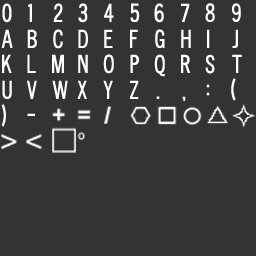
<style>
.page{position:relative;width:256px;height:256px;background:#333333}
.page>*{position:absolute;margin:0}
.t1{font:24px "CHANLPlain";color:#ffffff}
</style>
<div class="page">
<p class="t1" style="left:2px;top:3px;width:10px;height:20px">0</p>
<p class="t1" style="left:28px;top:3px;width:4px;height:19px">1</p>
<p class="t1" style="left:53px;top:3px;width:10px;height:19px">2</p>
<p class="t1" style="left:78px;top:3px;width:10px;height:20px">3</p>
<p class="t1" style="left:104px;top:3px;width:10px;height:19px">4</p>
<p class="t1" style="left:130px;top:3px;width:10px;height:19px">5</p>
<p class="t1" style="left:154px;top:3px;width:10px;height:20px">6</p>
<p class="t1" style="left:181px;top:3px;width:9px;height:19px">7</p>
<p class="t1" style="left:205px;top:3px;width:10px;height:19px">8</p>
<p class="t1" style="left:232px;top:3px;width:9px;height:19px">9</p>
<p class="t1" style="left:1px;top:29px;width:12px;height:19px">A</p>
<p class="t1" style="left:27px;top:29px;width:10px;height:19px">B</p>
<p class="t1" style="left:53px;top:29px;width:10px;height:20px">C</p>
<p class="t1" style="left:78px;top:29px;width:10px;height:19px">D</p>
<p class="t1" style="left:104px;top:29px;width:9px;height:19px">E</p>
<p class="t1" style="left:130px;top:29px;width:8px;height:19px">F</p>
<p class="t1" style="left:155px;top:29px;width:10px;height:19px">G</p>
<p class="t1" style="left:181px;top:29px;width:10px;height:19px">H</p>
<p class="t1" style="left:207px;top:29px;width:3px;height:19px">I</p>
<p class="t1" style="left:232px;top:29px;width:6px;height:19px">J</p>
<p class="t1" style="left:2px;top:54px;width:10px;height:19px">K</p>
<p class="t1" style="left:27px;top:54px;width:9px;height:19px">L</p>
<p class="t1" style="left:78px;top:54px;width:10px;height:19px">N</p>
<p class="t1" style="left:103px;top:54px;width:11px;height:20px">O</p>
<p class="t1" style="left:130px;top:54px;width:9px;height:19px">P</p>
<p class="t1" style="left:154px;top:54px;width:11px;height:23px">Q</p>
<p class="t1" style="left:181px;top:54px;width:10px;height:19px">R</p>
<p class="t1" style="left:205px;top:54px;width:10px;height:20px">S</p>
<p class="t1" style="left:232px;top:54px;width:10px;height:19px">T</p>
<p class="t1" style="left:231px;top:78px;width:5px;height:23px">[</p>
<p class="t1" style="left:2px;top:80px;width:10px;height:19px">U</p>
<p class="t1" style="left:27px;top:80px;width:10px;height:19px">V</p>
<p class="t1" style="left:52px;top:80px;width:16px;height:19px">W</p>
<p class="t1" style="left:77px;top:80px;width:10px;height:19px">X</p>
<p class="t1" style="left:103px;top:80px;width:10px;height:19px">Y</p>
<p class="t1" style="left:130px;top:80px;width:9px;height:19px">Z</p>
<p class="t1" style="left:206px;top:84px;width:4px;height:12px">:</p>
<p class="t1" style="left:156px;top:96px;width:4px;height:3px">.</p>
<p class="t1" style="left:182px;top:96px;width:4px;height:5px">,</p>
<p class="t1" style="left:1px;top:104px;width:5px;height:23px">]</p>
<p class="t1" style="left:27px;top:113px;width:8px;height:3px">-</p>
</div>
